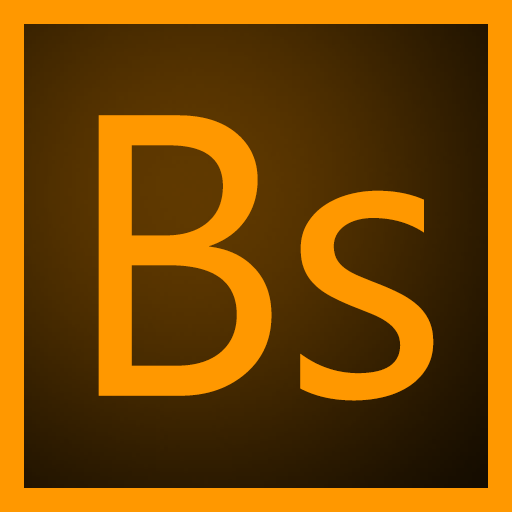
<style>
.page{position:relative;width:512px;height:512px;background:#ff9800}
.page>*{position:absolute;margin:0}
.t1{font:400px "SegoeUI";color:#ff9800}
</style>
<div class="page">
<p class="t1" style="left:98px;top:115px;width:336px;height:286px">Bs</p>
</div>
